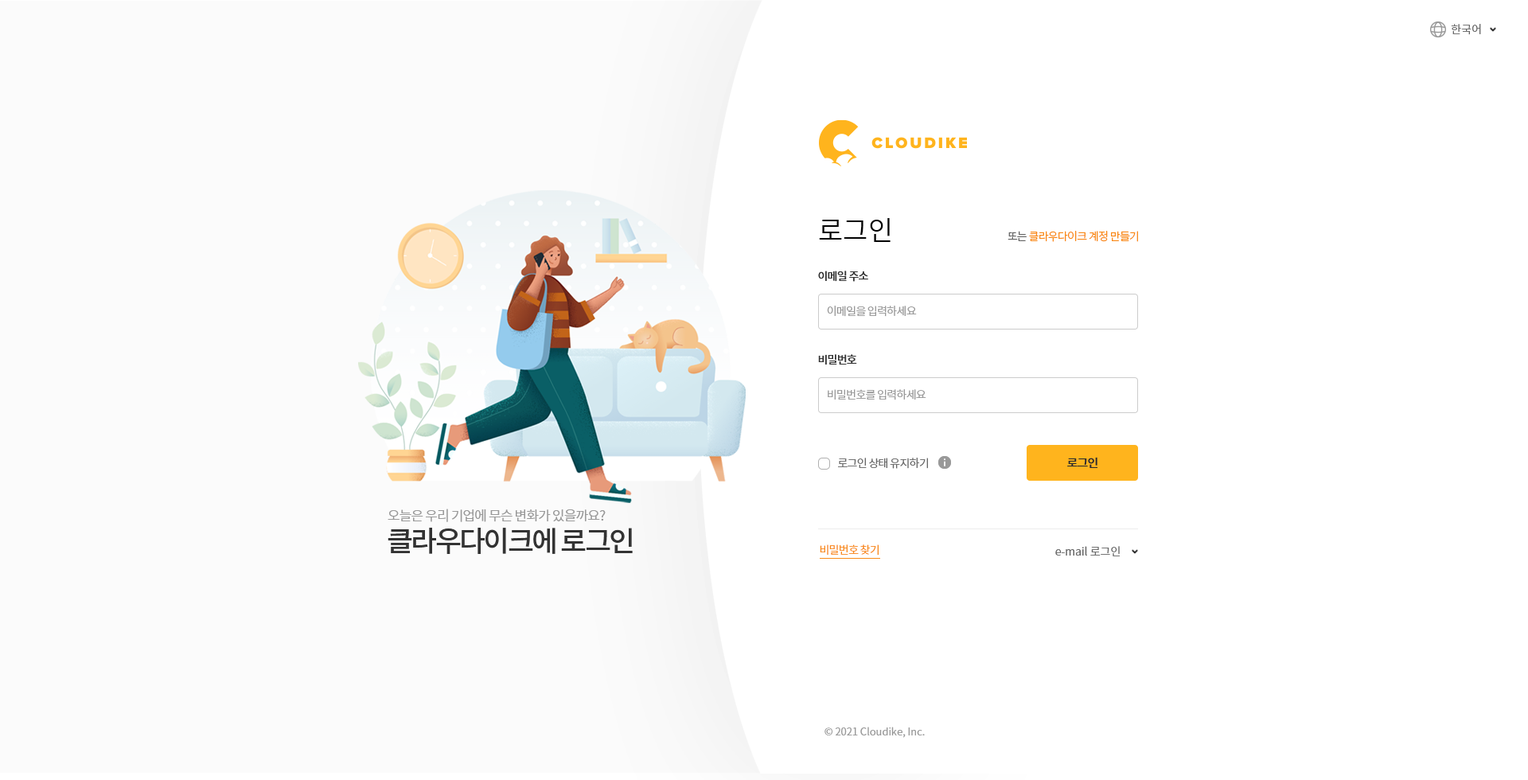
<style>
.page{position:relative;width:1528px;height:780px;background:#ffffff}
.page>*{position:absolute;margin:0}
.t1{font:11.1px "NotoSansCJKkr-DemiLight";color:#666666}
.t2{font:27.1px "NotoSansCJKkr-DemiLight";color:#000000}
.t3{font:11.1px "NotoSansCJKkr-DemiLight";letter-spacing:-0.05em;color:#f98a17}
.t4{font:11.1px "NotoSansCJKkr-DemiLight";letter-spacing:-0.05em;color:#666666}
.t5{font:11.1px "NotoSansCJKkr-Medium";letter-spacing:-0.05em;color:#333333}
.t6{font:11.1px "NotoSansCJKkr-DemiLight";letter-spacing:-0.05em;color:#999999}
.t7{font:11.9px "NotoSansCJKkr-Medium";letter-spacing:-0.05em;color:#2d2d2d}
.t8{font:13.5px "NotoSansCJKkr-DemiLight";letter-spacing:-0.05em;color:#999999}
.t9{font:28.7px "NotoSansCJKkr-Medium";letter-spacing:-0.075em;color:#333333}
.t10{font:10.3px "NotoSansCJKkr-DemiLight";color:#999999}
</style>
<div class="page">
<p class="t1" style="left:1451px;top:24px;width:30px;height:11px">한국어</p>
<p class="t2" style="left:819px;top:218px;width:72px;height:24px">로그인</p>
<p class="t3" style="left:1008px;top:231px;width:130px;height:11px"><span class="t4">또는 </span>클라우다이크 계정 만들기</p>
<p class="t5" style="left:818px;top:271px;width:51px;height:11px">이메일 주소</p>
<p class="t6" style="left:827px;top:306px;width:90px;height:11px">이메일을 입력하세요</p>
<p class="t5" style="left:818px;top:354px;width:39px;height:11px">비밀번호</p>
<p class="t6" style="left:828px;top:389px;width:99px;height:11px">비밀번호를 입력하세요</p>
<p class="t4" style="left:838px;top:458px;width:90px;height:11px">로그인 상태 유지하기</p>
<p class="t7" style="left:1068px;top:457px;width:30px;height:11px">로그인</p>
<p class="t8" style="left:388px;top:509px;width:218px;height:13px">오늘은 우리 기업에 무슨 변화가 있을까요?</p>
<p class="t9" style="left:388px;top:528px;width:245px;height:26px">클라우다이크에 로그인</p>
<p class="t3" style="left:820px;top:545px;width:59px;height:11px">비밀번호 찾기</p>
<p class="t1" style="left:1056px;top:546px;width:64px;height:10px">e-mail 로그인</p>
<p class="t10" style="left:825px;top:727px;width:100px;height:11px">© 2021 Cloudike, Inc.</p>
</div>
